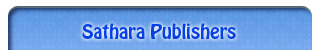
<style>
.page{position:relative;width:320px;height:50px}
.page>*{position:absolute;margin:0}
.t1{font:18px "HoboStd";color:#0841e3}
</style>
<div class="page">
<p class="t1" style="left:82px;top:23px;width:154px;height:16px">Sathara Publishers</p>
</div>
